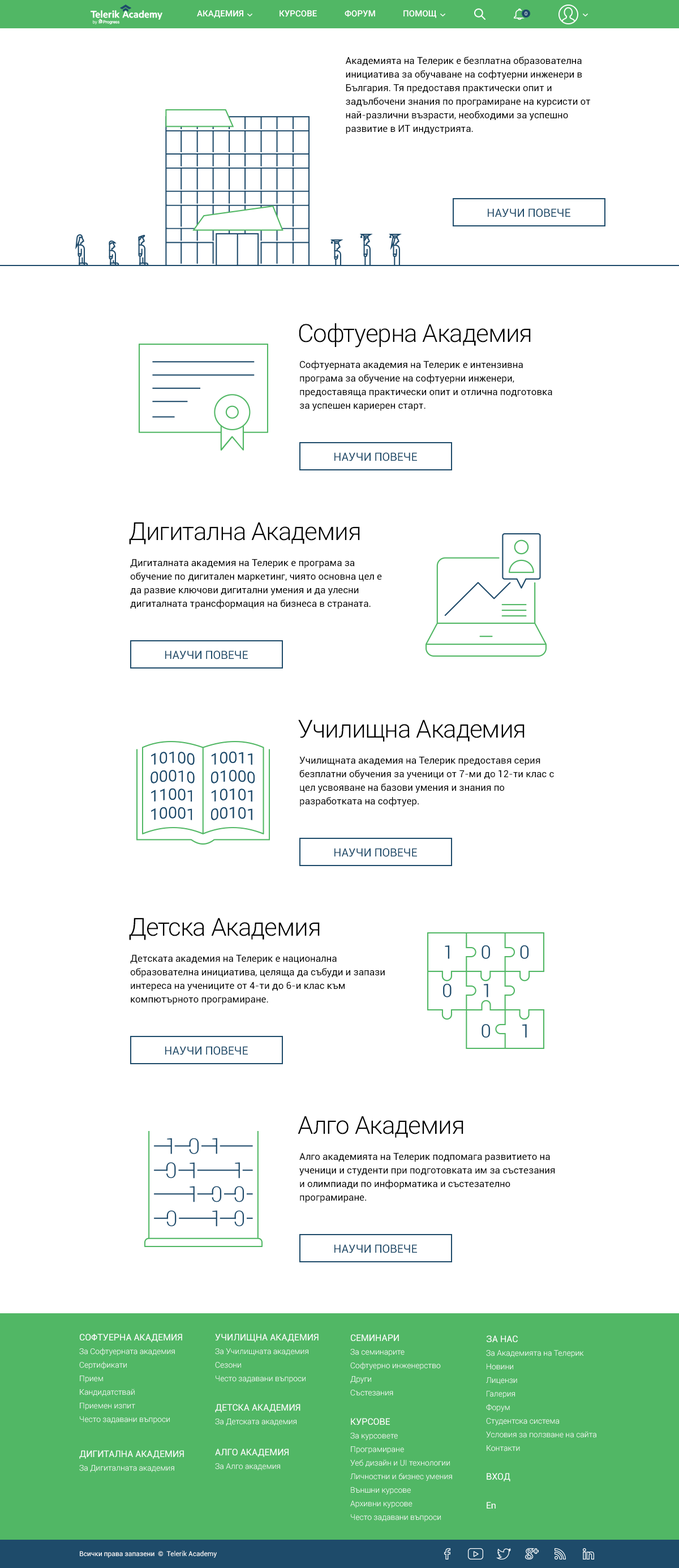
<style>
.page{position:relative;width:679px;height:1568px;background:#ffffff}
.page>*{position:absolute;margin:0}
.t1{font:8.5px "Roboto-Medium";letter-spacing:0.005em;color:#ffffff}
.t2{font:9.6px/13.6px "Roboto-Regular";color:#000000}
.t3{font:11.3px "Roboto-Regular";color:#1e4b6a;text-transform:uppercase}
.t4{font:24.9px "Roboto-Light";letter-spacing:-0.025em;color:#000000}
.t5{font:7.9px/13.6px "Roboto-Light";color:#ffffff}
.t6{font:9.1px/13.6px "Roboto-Regular";color:#ffffff;text-transform:uppercase}
.t7{font:9.1px "Roboto-Regular";color:#ffffff;text-transform:uppercase}
.t8{font:9.1px "Roboto-Regular";color:#ffffff}
.t9{font:6.8px "Roboto-Regular";color:#ffffff}
</style>
<div class="page">
<p class="t1" style="left:197px;top:10px;width:46px;height:8px">АКАДЕМИЯ</p>
<p class="t1" style="left:280px;top:10px;width:37px;height:7px">КУРСОВЕ</p>
<p class="t1" style="left:345px;top:10px;width:30px;height:7px">ФОРУМ</p>
<p class="t1" style="left:404px;top:10px;width:33px;height:8px">ПОМОЩ</p>
<p class="t2" style="left:346px;top:57px;width:244px;height:77px">Академията на Телерик е безплатна образователна инициатива за обучаване на софтуерни инженери в България. Тя предоставя практически опит и задълбочени знания по програмиране на курсисти от най-различни възрасти, необходими за успешно развитие в ИТ индустрията.</p>
<p class="t3" style="left:488px;top:208px;width:83px;height:9px">НАУЧИ ПОВЕЧЕ</p>
<p class="t4" style="left:299px;top:323px;width:232px;height:25px">Софтуерна Академия</p>
<p class="t2" style="left:300px;top:361px;width:252px;height:50px">Софтуерната академия на Телерик е интензивна програма за обучение на софтуерни инженери, предоставяща практически опит и отлична подготовка за успешен кариерен старт.</p>
<p class="t3" style="left:335px;top:452px;width:82px;height:9px">НАУЧИ ПОВЕЧЕ</p>
<p class="t4" style="left:129px;top:522px;width:231px;height:23px">Дигитална Академия</p>
<p class="t2" style="left:130px;top:559px;width:252px;height:50px">Дигиталната академия на Телерик е програма за обучение по дигитален маркетинг, чиято основна цел е да развие ключови дигитални умения и да улесни дигиталната трансформация на бизнеса в страната.</p>
<p class="t3" style="left:165px;top:650px;width:83px;height:9px">НАУЧИ ПОВЕЧЕ</p>
<p class="t4" style="left:298px;top:719px;width:227px;height:23px">Училищна Академия</p>
<p class="t2" style="left:299px;top:756px;width:255px;height:51px">Училищната академия на Телерик предоставя серия безплатни обучения за ученици от 7-ми до 12-ти клас с цел усвояване на базови умения и знания по разработката на софтуер.</p>
<p class="t3" style="left:335px;top:848px;width:82px;height:9px">НАУЧИ ПОВЕЧЕ</p>
<p class="t4" style="left:129px;top:918px;width:191px;height:22px">Детска Академия</p>
<p class="t2" style="left:130px;top:954px;width:255px;height:51px">Детската академия на Телерик е национална образователна инициатива, целяща да събуди и запази интереса на учениците от 4-ти до 6-и клас към компютърното програмиране.</p>
<p class="t3" style="left:165px;top:1046px;width:83px;height:9px">НАУЧИ ПОВЕЧЕ</p>
<p class="t4" style="left:298px;top:1116px;width:166px;height:22px">Алго Академия</p>
<p class="t2" style="left:299px;top:1153px;width:256px;height:50px">Алго академията на Телерик подпомага развитието на ученици и студенти при подготовката им за състезания и олимпиади по информатика и състезателно програмиране.</p>
<p class="t3" style="left:335px;top:1244px;width:82px;height:9px">НАУЧИ ПОВЕЧЕ</p>
<p class="t5" style="left:79px;top:1334px;width:103px;height:90px"><span class="t6">Софтуерна Академия<br></span>За Софтуерната академия<br>Сертификати<br>Прием<br>Кандидатствай<br>Приемен изпит<br>Често задавани въпроси</p>
<p class="t5" style="left:215px;top:1334px;width:104px;height:49px"><span class="t6">Училищна Академия<br></span>За Училищната академия<br>Сезони<br>Често задавани въпроси</p>
<p class="t5" style="left:350px;top:1334px;width:91px;height:62px"><span class="t6">Семинари<br></span>За семинарите<br>Софтуерно инженерство<br>Други<br>Състезания</p>
<p class="t5" style="left:486px;top:1335px;width:111px;height:116px"><span class="t6">За нас<br></span>За Академията на Телерик<br>Новини<br>Лицензи<br>Галерия<br>Форум<br>Студентска система<br>Условия за ползване на сайта<br>Контакти</p>
<p class="t5" style="left:215px;top:1404px;width:86px;height:22px"><span class="t6">Детска Академия<br></span>За Детската академия</p>
<p class="t5" style="left:350px;top:1418px;width:102px;height:104px"><span class="t6">Kурсове<br></span>За курсовете<br>Програмиране<br>Уеб дизайн и UI технологии<br>Личностни и бизнес умения<br>Външни курсове<br>Архивни курсове<br>Често задавани въпроси</p>
<p class="t5" style="left:79px;top:1450px;width:105px;height:22px"><span class="t6">Дигитална Академия<br></span>За Дигиталната академия</p>
<p class="t5" style="left:215px;top:1449px;width:74px;height:22px"><span class="t6">Алго Академия<br></span>За Алго академия</p>
<p class="t7" style="left:487px;top:1473px;width:24px;height:8px">Вход</p>
<p class="t8" style="left:487px;top:1502px;width:9px;height:7px">En</p>
<p class="t9" style="left:80px;top:1550px;width:137px;height:8px">Всички права запазени  ©  Telerik Academy</p>
</div>
